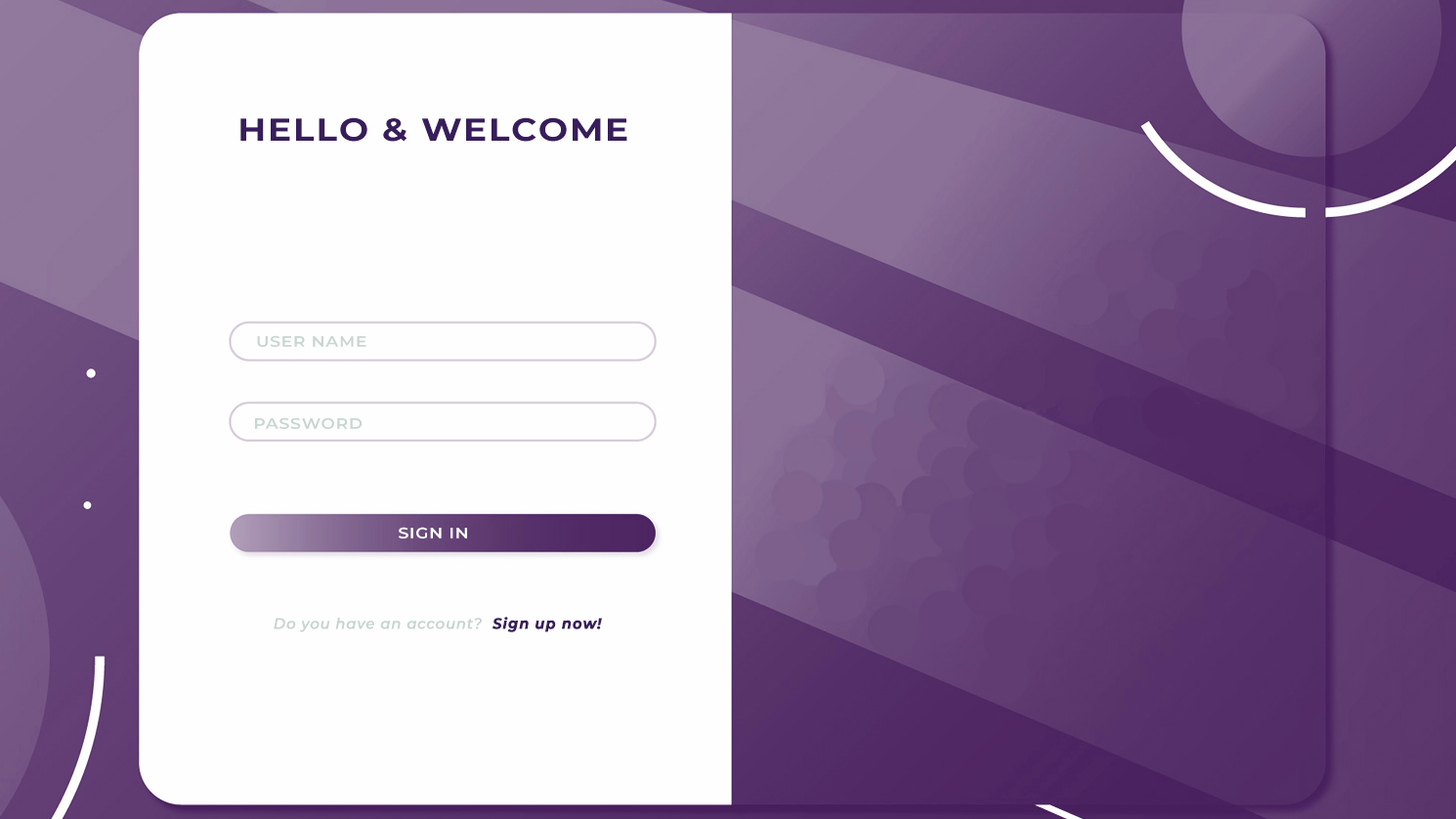
<style>
.page{position:relative;width:1456px;height:819px;background:#fefefe}
.page>*{position:absolute;margin:0}
.t1{font:31.7px "Montserrat-Bold";letter-spacing:0.05em;color:#381d5c;scale:1.11 1}
.t2{font:15px "Montserrat-SemiBold";letter-spacing:0.05em;color:#c8d6d0;scale:1.11 1}
.t3{font:15px "Montserrat-SemiBold";letter-spacing:0.05em;color:#ffffff;scale:1.11 1}
.t4{font:15px "Montserrat-MediumItalic";letter-spacing:0.05em;color:#c5d5cd;font-weight:bold;scale:0.94 1}
.t5{font:15px "Montserrat-BoldItalic";letter-spacing:0.05em;color:#381d5c;font-weight:bold;scale:0.94 1}
</style>
<div class="page">
<p class="t1" style="left:240px;top:117px;width:387px;height:25px">HELLO &amp; WELCOME</p>
<p class="t2" style="left:257px;top:335px;width:109px;height:12px">USER NAME</p>
<p class="t2" style="left:255px;top:417px;width:108px;height:12px">PASSWORD</p>
<p class="t3" style="left:399px;top:527px;width:68px;height:11px">SIGN IN</p>
<p class="t4" style="left:274px;top:617px;width:328px;height:15px">Do you have an account?  <span class="t5">Sign up now!</span></p>
</div>
